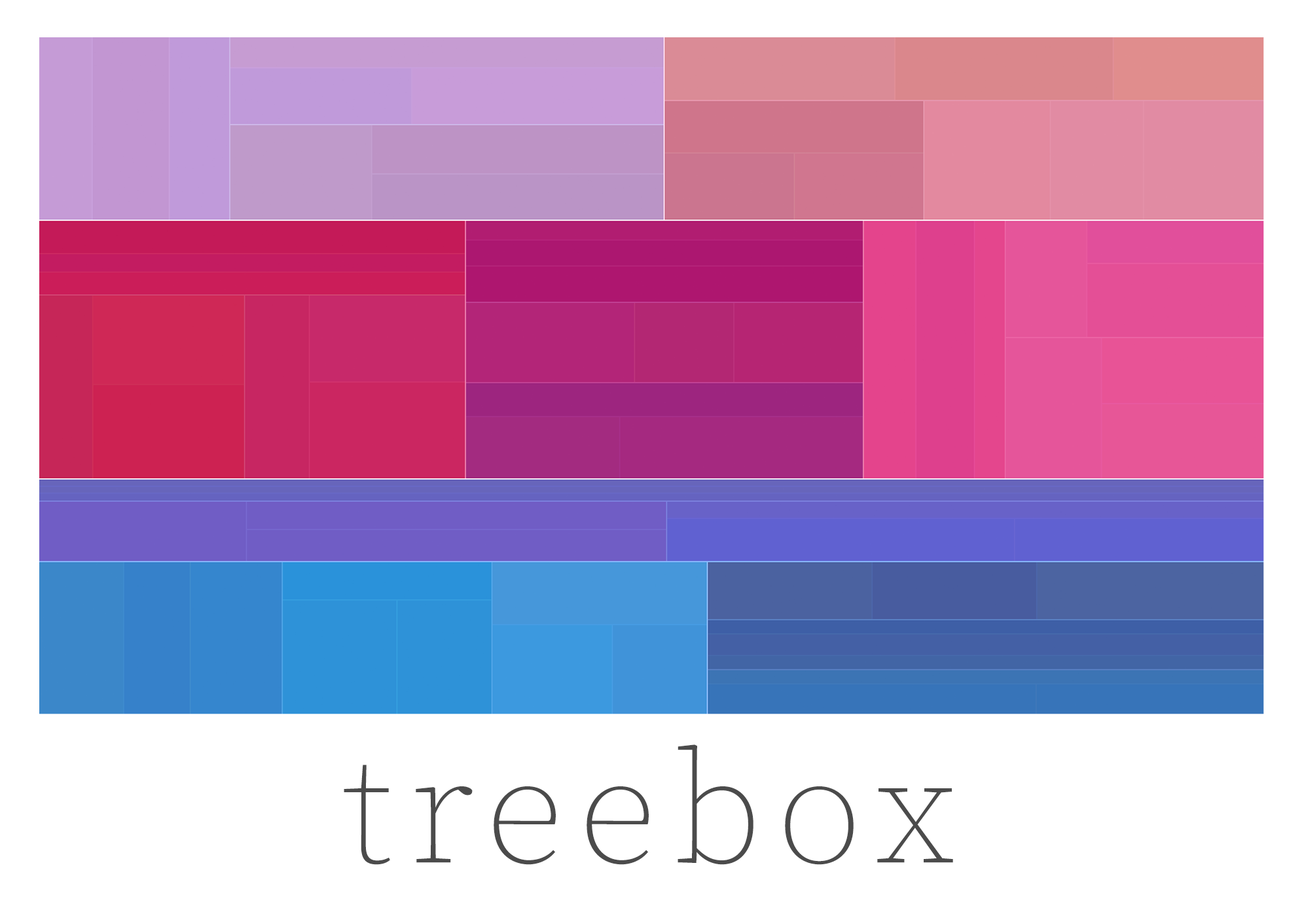
<style>
.page{position:relative;width:1304px;height:914px;background:#ffffff}
.page>*{position:absolute;margin:0}
.t1{font:157.2px "SourceSerifRoman-ExtraLight";letter-spacing:0.1em;color:#4b4b4b}
</style>
<div class="page">
<p class="t1" style="left:344px;top:745px;width:609px;height:120px">treebox</p>
</div>
